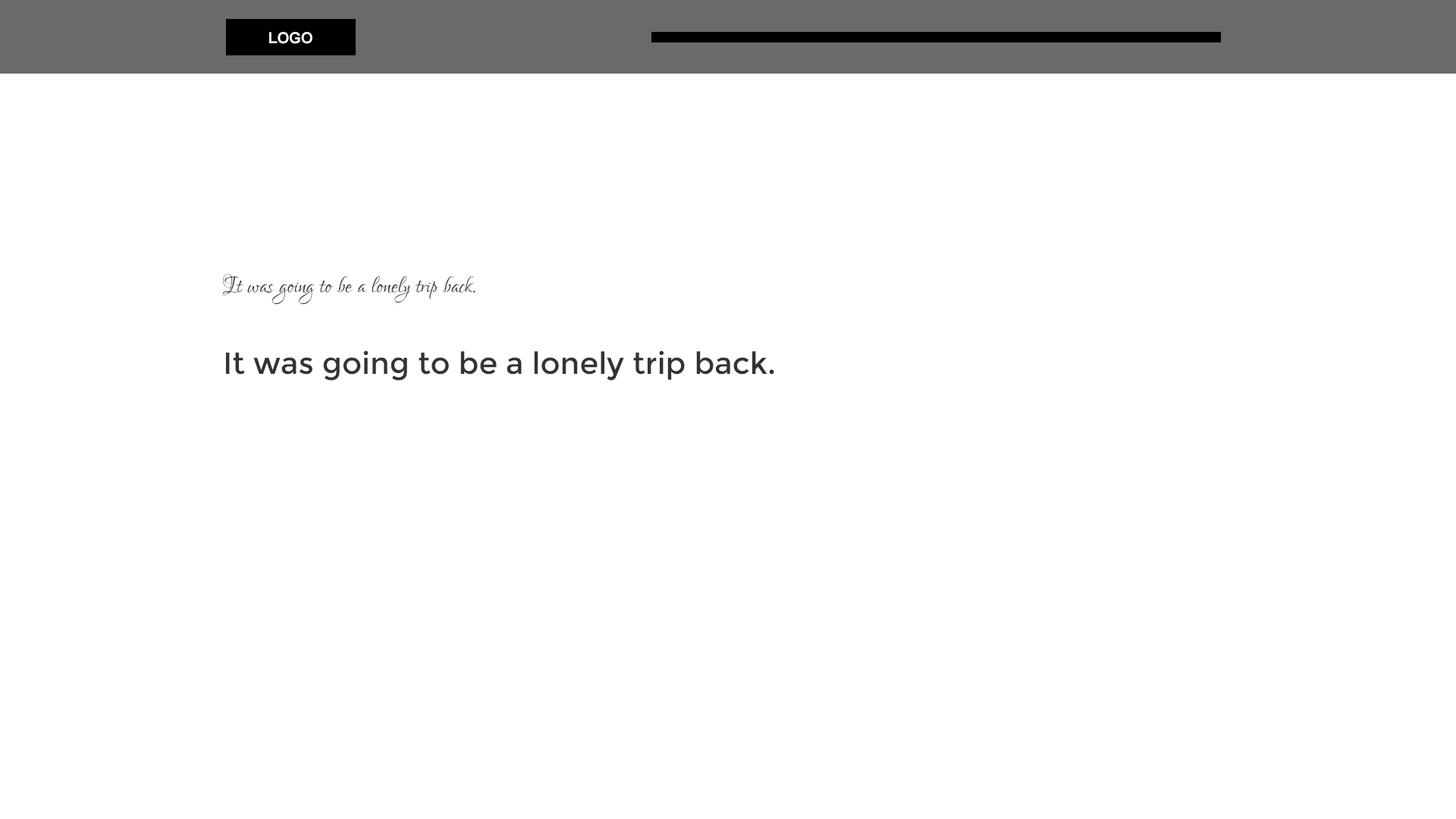
<style>
.page{position:relative;width:1456px;height:819px;background:#ffffff}
.page>*{position:absolute;margin:0}
.t1{font:15.2px "Arial-BoldMT";color:#ffffff;text-transform:uppercase}
.t2{font:30.3px "LoversQuarrel-Regular";color:#333333}
.t3{font:30.3px "Montserrat-Regular";color:#333333}
</style>
<div class="page">
<p class="t1" style="left:269px;top:32px;width:43px;height:12px">Logo</p>
<p class="t2" style="left:222px;top:274px;width:253px;height:30px">It was going to be a lonely trip back.</p>
<p class="t3" style="left:226px;top:350px;width:548px;height:31px">It was going to be a lonely trip back.</p>
</div>
